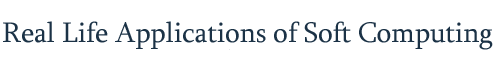
<style>
.page{position:relative;width:504px;height:60px;background:#ffffff}
.page>*{position:absolute;margin:0}
.t1{font:29px "Sylfaen";letter-spacing:-0.005em;color:#1b3246}
</style>
<div class="page">
<p class="t1" style="left:3px;top:21px;width:490px;height:29px">Real Life Applications of Soft Computing</p>
</div>
